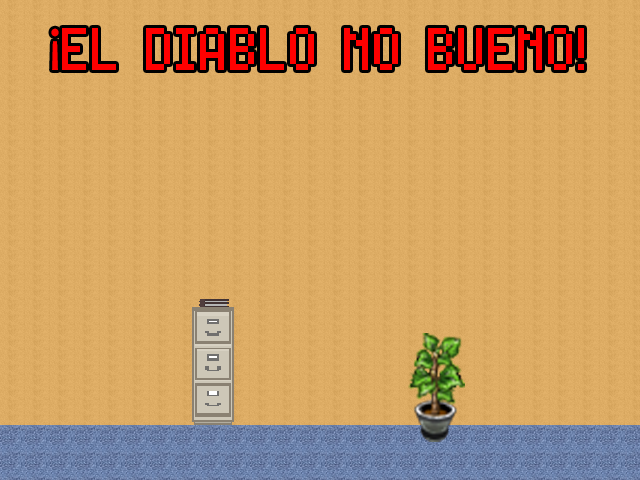
<style>
.page{position:relative;width:640px;height:480px}
.page>*{position:absolute;margin:0}
.t1{font:60px "AdvoCut";color:#ff0000}
.t2{font:60px "MyriadPro-Regular";color:#ff0000}
</style>
<div class="page">
<p class="t1" style="left:51px;top:28px;width:533px;height:42px"><span class="t2">¡</span>EL DIABLO NO BUENO!</p>
</div>
